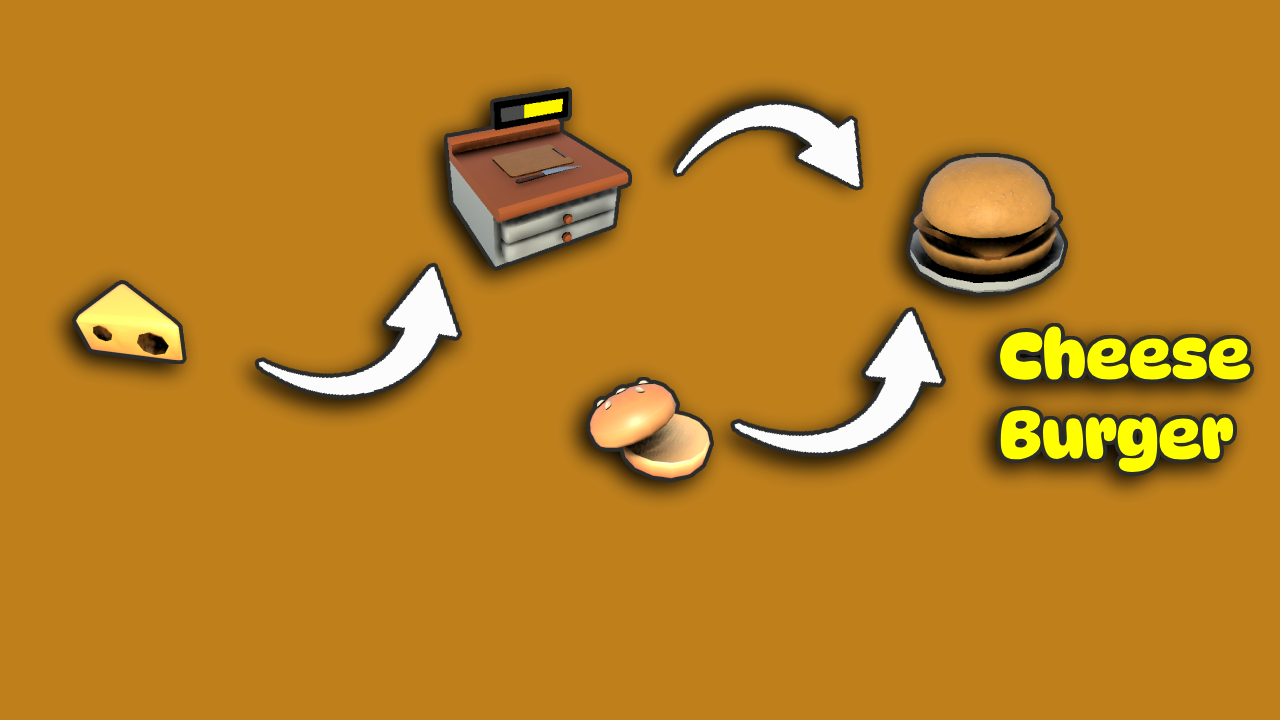
<style>
.page{position:relative;width:1280px;height:720px;background:#bf801c}
.page>*{position:absolute;margin:0}
.t1{font:66.2px "DynaPuff-Bold";color:#ffff00}
</style>
<div class="page">
<p class="t1" style="left:1000px;top:326px;width:251px;height:146px">Cheese<br>Burger</p>
</div>
